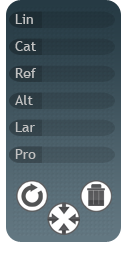
<style>
.page{position:relative;width:128px;height:256px}
.page>*{position:absolute;margin:0}
.t1{font:14px "TrebuchetMS";color:#c0c0c0}
</style>
<div class="page">
<p class="t1" style="left:15px;top:14px;width:18px;height:10px">Lin</p>
<p class="t1" style="left:15px;top:41px;width:21px;height:10px">Cat</p>
<p class="t1" style="left:15px;top:68px;width:21px;height:10px">Ref</p>
<p class="t1" style="left:15px;top:95px;width:18px;height:10px">Alt</p>
<p class="t1" style="left:15px;top:122px;width:20px;height:10px">Lar</p>
<p class="t1" style="left:15px;top:149px;width:21px;height:10px">Pro</p>
</div>
